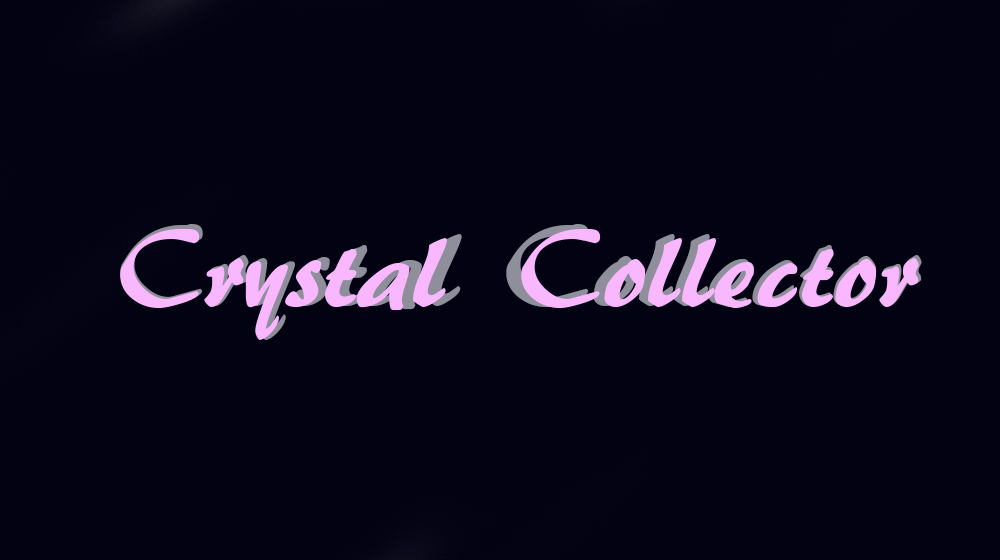
<style>
.page{position:relative;width:1000px;height:560px;background:#020212}
.page>*{position:absolute;margin:0}
.t1{font:120px "ARBERKLEY"}
</style>
<div class="page">
<p class="t1" style="left:120px;top:224px;width:802px;height:116px">Crystal Collector</p>
</div>
